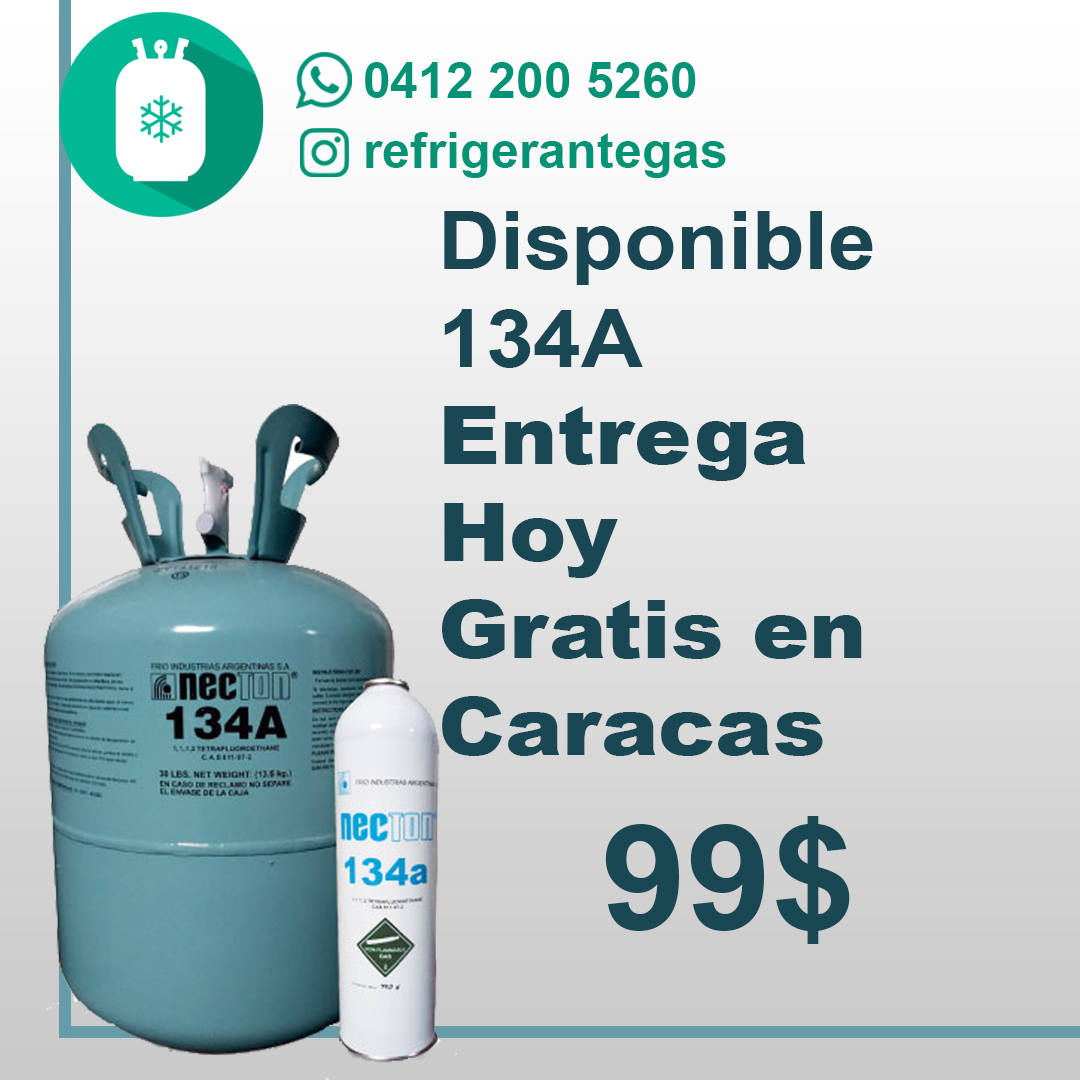
<style>
.page{position:relative;width:1080px;height:1080px}
.page>*{position:absolute;margin:0}
.t1{font:50.3px "Arial-BoldMT";color:#009376}
.t2{font:81px "Arial-Black";color:#1a4754;scale:1.06 1}
.t3{font:81px "Arial-BoldMT";color:#1a4754;scale:1.06 1}
.t4{font:144.7px "Arial-BoldMT";color:#1a4754;scale:1.06 1}
</style>
<div class="page">
<p class="t1" style="left:365px;top:62px;width:331px;height:36px">0412 200 5260</p>
<p class="t1" style="left:366px;top:132px;width:360px;height:46px">refrigerantegas</p>
<p class="t2" style="left:442px;top:211px;width:431px;height:733px"><span class="t3">Disponible<br>134A<br></span>Entrega<br>Hoy<br>Gratis en Caracas<br>      <span class="t4">99$</span></p>
</div>
